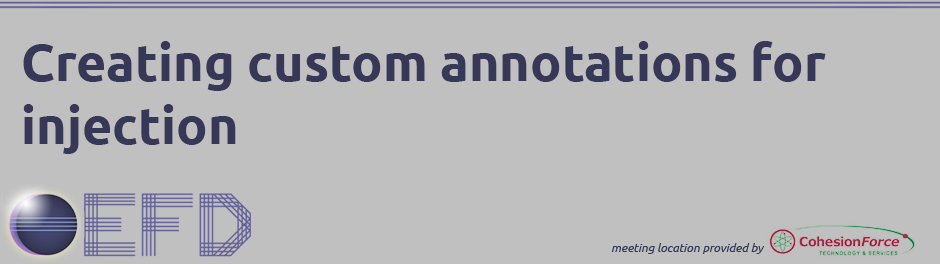
<style>
.page{position:relative;width:940px;height:264px;background:#c0c0c0}
.page>*{position:absolute;margin:0}
.t1{font:52px "Ubuntu-Bold";color:#373857}
.t2{font:12px "Ubuntu-Italic";color:#373857}
</style>
<div class="page">
<p class="t1" style="left:23px;top:41px;width:803px;height:113px">Creating custom annotations for injection</p>
<p class="t2" style="left:611px;top:243px;width:153px;height:11px">meeting location provided by</p>
</div>
